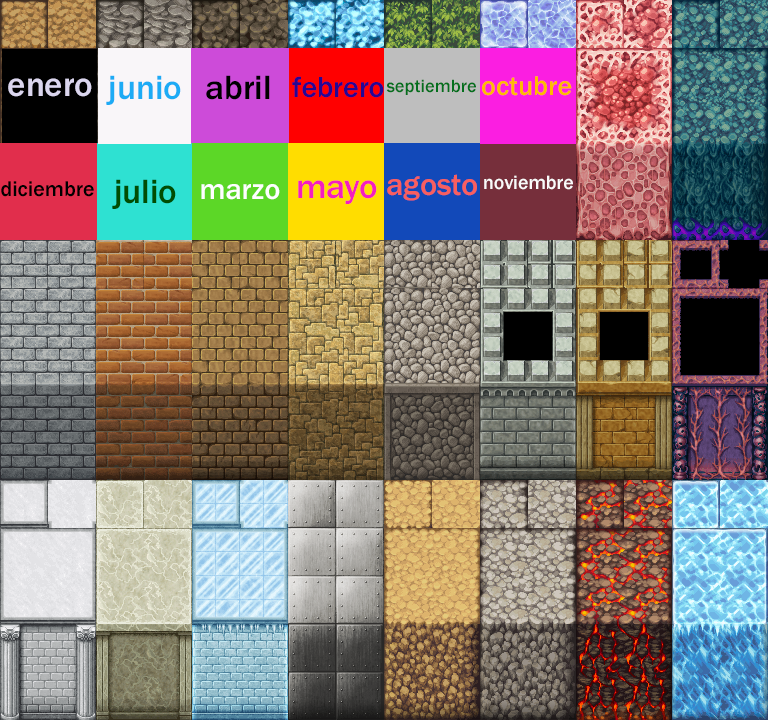
<style>
.page{position:relative;width:768px;height:720px}
.page>*{position:absolute;margin:0}
.t1{font:35px "FranklinGothic-Medium";color:#dbd6ee}
.t2{font:35px "FranklinGothic-Medium";color:#1dabf5}
.t3{font:35px "FranklinGothic-Medium";color:#000000}
.t4{font:30px "FranklinGothic-Medium";color:#240893}
.t5{font:28px "FranklinGothic-Medium";color:#ffbb00}
.t6{font:18.5px "FranklinGothic-Medium";color:#046f1d}
.t7{font:32px "FranklinGothic-Medium";color:#f85f5f}
.t8{font:22px "FranklinGothic-Medium";color:#000101}
.t9{font:35px "FranklinGothic-Medium";color:#014d01}
.t10{font:30px "FranklinGothic-Medium";color:#fefeff}
.t11{font:35px "FranklinGothic-Medium";color:#f51dc0}
.t12{font:20px "FranklinGothic-Medium";color:#fafafa}
</style>
<div class="page">
<p class="t1" style="left:8px;top:78px;width:84px;height:19px">enero</p>
<p class="t2" style="left:106px;top:75px;width:75px;height:30px">junio</p>
<p class="t3" style="left:206px;top:75px;width:64px;height:25px">abril</p>
<p class="t4" style="left:292px;top:76px;width:92px;height:22px">febrero</p>
<p class="t5" style="left:482px;top:76px;width:90px;height:20px">octubre</p>
<p class="t6" style="left:386px;top:79px;width:90px;height:16px">septiembre</p>
<p class="t7" style="left:387px;top:174px;width:90px;height:27px">agosto</p>
<p class="t8" style="left:1px;top:181px;width:93px;height:16px">diciembre</p>
<p class="t9" style="left:112px;top:179px;width:64px;height:30px">julio</p>
<p class="t10" style="left:201px;top:184px;width:79px;height:16px">marzo</p>
<p class="t11" style="left:298px;top:180px;width:79px;height:24px">mayo</p>
<p class="t12" style="left:484px;top:175px;width:89px;height:15px">noviembre</p>
</div>
